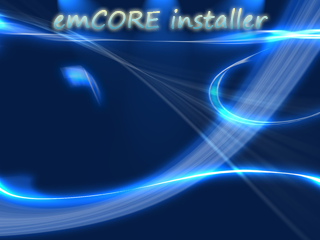
<style>
.page{position:relative;width:320px;height:240px;background:#051c45}
.page>*{position:absolute;margin:0}
.t1{font:24px "SegoePrint"}
</style>
<div class="page">
<p class="t1" style="left:54px;top:8px;width:214px;height:21px">emCORE installer</p>
</div>
